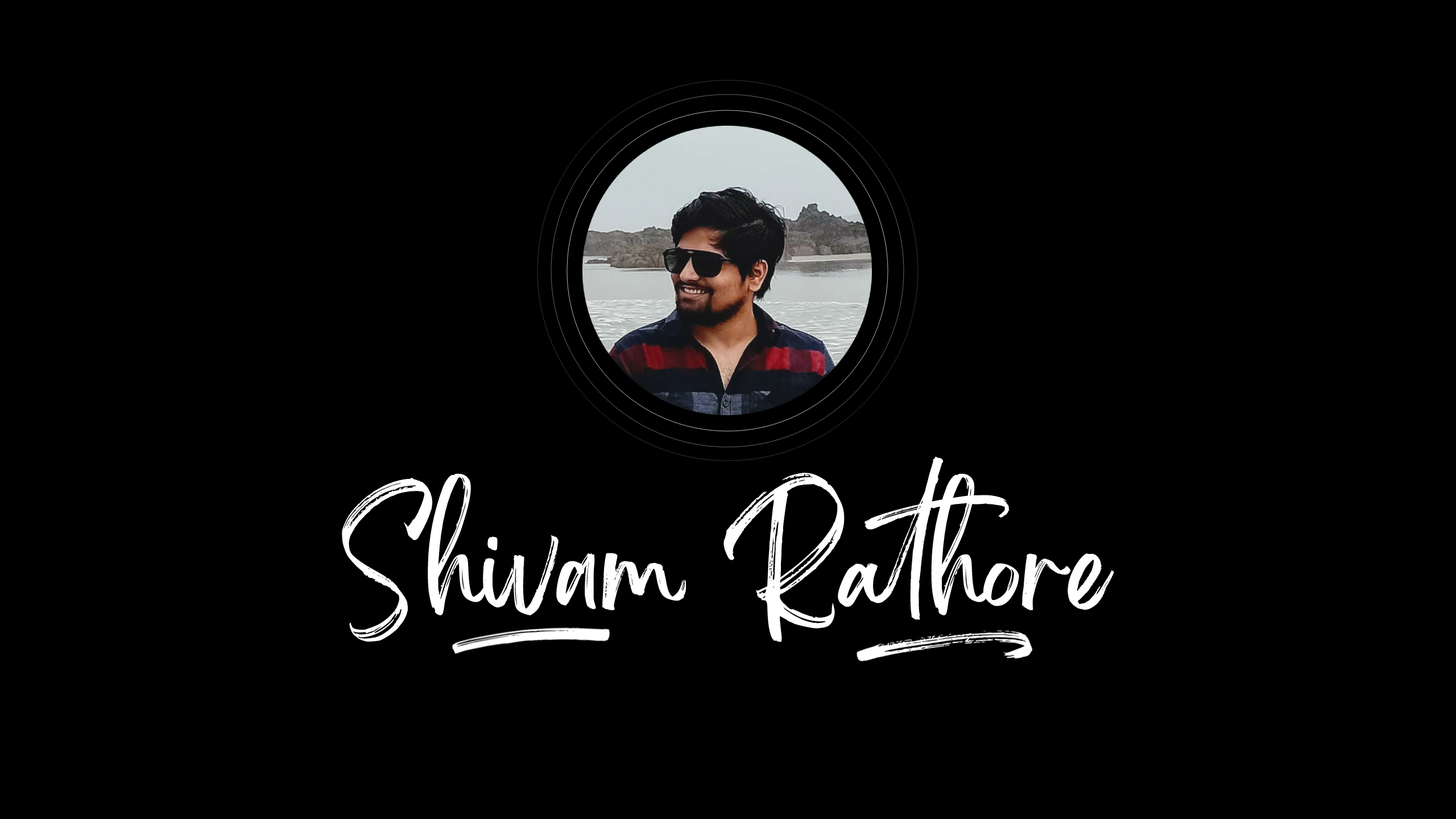
<style>
.page{position:relative;width:1456px;height:819px;background:#000000}
.page>*{position:absolute;margin:0}
.t1{font:103.7px "Brightwall";color:#ffffff}
</style>
<div class="page">
<p class="t1" style="left:342px;top:457px;width:772px;height:185px">Shivam Rathore</p>
</div>
